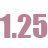
<style>
.page{position:relative;width:48px;height:48px;background:#ffffff}
.page>*{position:absolute;margin:0}
.t1{font:30px "Impact";color:#bb8194}
</style>
<div class="page">
<p class="t1" style="left:0px;top:14px;width:48px;height:24px">1.25</p>
</div>
